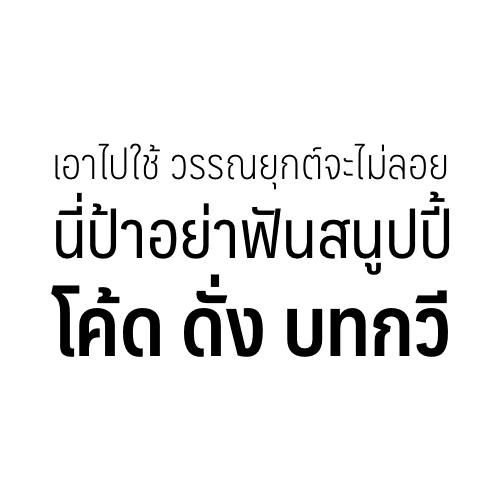
<style>
.page{position:relative;width:500px;height:500px;background:#ffffff}
.page>*{position:absolute;margin:0}
.t1{font:42px "Maledpan-Light";color:#000000}
.t2{font:65.9px "Maledpan-Regular";color:#000000}
.t3{font:82px "Maledpan-Bold";color:#000000}
</style>
<div class="page">
<p class="t1" style="left:51px;top:143px;width:399px;height:214px">เอาไปใช้ วรรณยุกต์จะไม่ลอย<br><span class="t2">นี่ป้าอย่าฟันสนูปปี้<br></span><span class="t3">โค้ด ดั่ง บทกวี</span></p>
</div>
